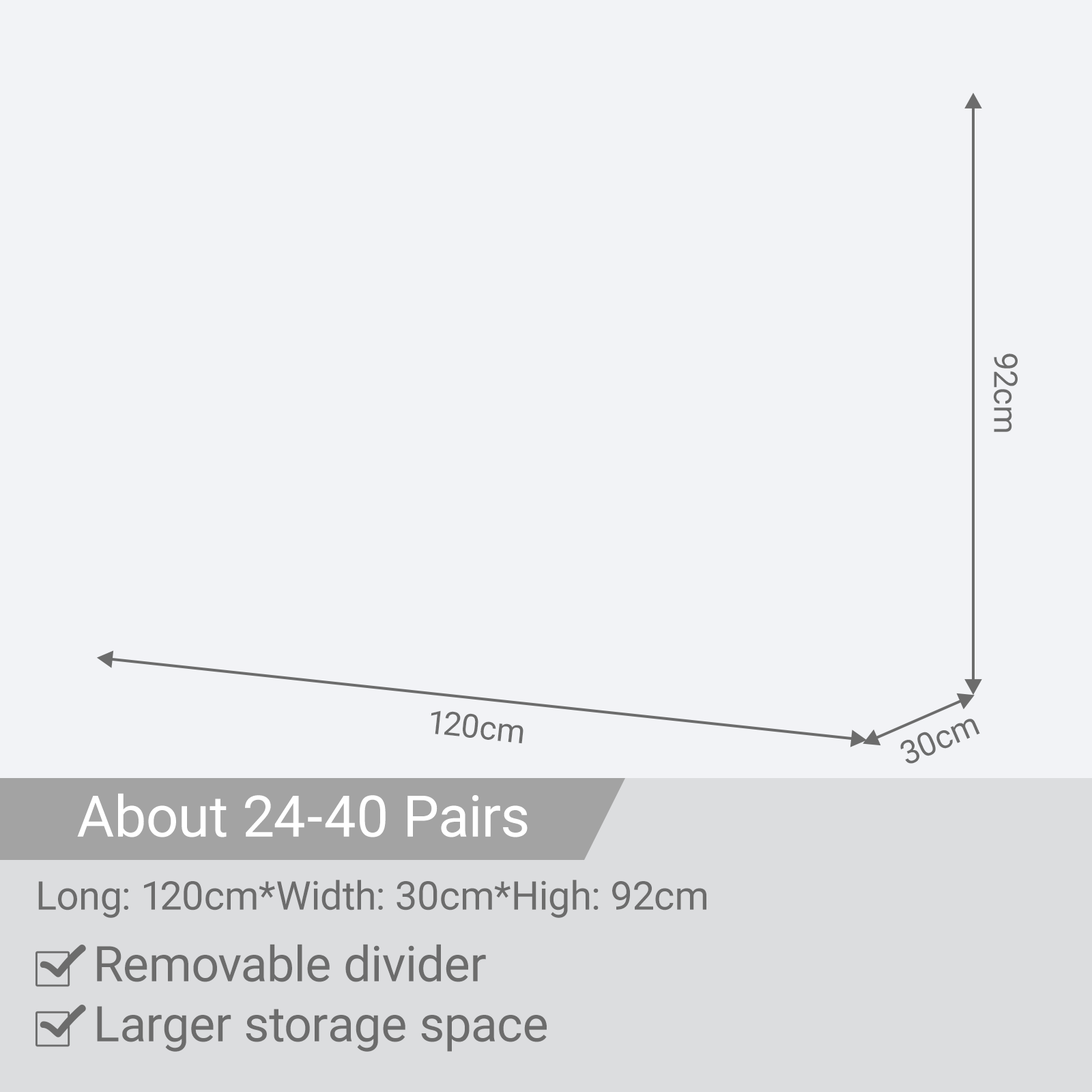
<style>
.page{position:relative;width:1092px;height:1092px;background:#f2f3f6}
.page>*{position:absolute;margin:0}
.t1{font:32.8px "Roboto-Regular";color:#6c6c6c}
.t2{font:57.3px "Roboto-Regular";color:#ffffff}
.t3{font:39.6px "Roboto-Regular";color:#6c6c6c}
.t4{font:49.1px "Roboto-Regular";color:#6c6c6c}
</style>
<div class="page">
<p class="t1" style="left:994px;top:354px;width:24px;height:78px;rotate:90deg">92cm</p>
<p class="t1" style="left:431px;top:710px;width:92px;height:34px;rotate:6deg">120cm</p>
<p class="t1" style="left:900px;top:719px;width:80px;height:45px;rotate:-24deg">30cm</p>
<p class="t2" style="left:77px;top:793px;width:451px;height:44px">About 24-40 Pairs</p>
<p class="t3" style="left:38px;top:880px;width:668px;height:38px">Long: 120cm*Width: 30cm*High: 92cm</p>
<p class="t4" style="left:97px;top:944px;width:389px;height:38px">Removable divider</p>
<p class="t4" style="left:97px;top:1006px;width:450px;height:46px">Larger storage space</p>
</div>
